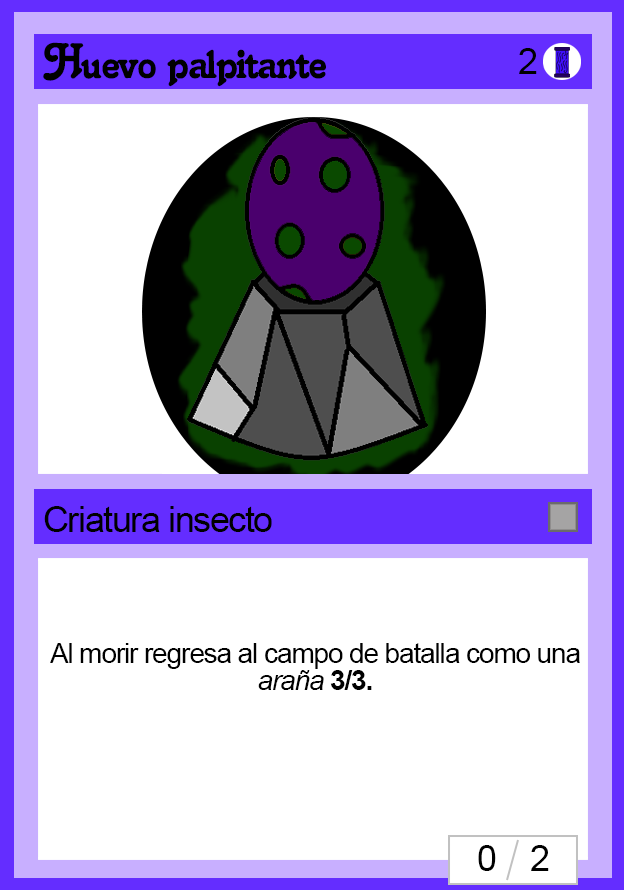
<style>
.page{position:relative;width:624px;height:890px;background:#ffffff}
.page>*{position:absolute;margin:0}
.t1{font:48px "Salina";letter-spacing:-0.04em;color:#000000}
.t2{font:36px "ArialMT";letter-spacing:-0.04em;color:#000000}
.t3{font:28px "ArialMT";letter-spacing:-0.04em;color:#000000}
.t4{font:28px "Arial-ItalicMT";letter-spacing:-0.04em;color:#000000}
.t5{font:28px "Arial-BoldMT";letter-spacing:-0.04em;color:#000000}
</style>
<div class="page">
<p class="t1" style="left:43px;top:42px;width:283px;height:45px">Huevo palpitante</p>
<p class="t2" style="left:519px;top:48px;width:18px;height:26px">2</p>
<p class="t2" style="left:44px;top:506px;width:228px;height:26px">Criatura insecto</p>
<p class="t3" style="left:50px;top:643px;width:530px;height:47px">Al morir regresa al campo de batalla como una <span class="t4">araña </span><span class="t5">3/3.</span></p>
<p class="t2" style="left:478px;top:845px;width:71px;height:26px">0    2</p>
</div>
